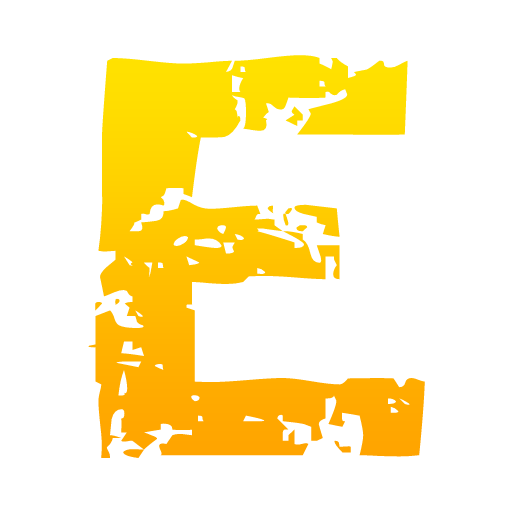
<style>
.page{position:relative;width:512px;height:512px;background:#ffffff}
.page>*{position:absolute;margin:0}
.t1{font:400px "Destroy"}
</style>
<div class="page">
<p class="t1" style="left:88px;top:55px;width:337px;height:403px">E</p>
</div>
